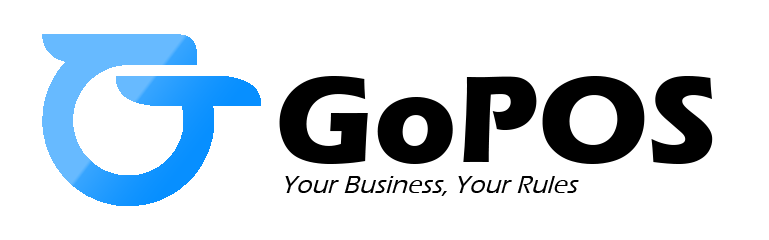
<style>
.page{position:relative;width:769px;height:240px;background:#ffffff}
.page>*{position:absolute;margin:0}
.t1{font:127.1px "ErasITC-Bold";color:#000000}
.t2{font:26.5px "ErasITC-Medium";color:#000000}
</style>
<div class="page">
<p class="t1" style="left:279px;top:76px;width:434px;height:88px">GoPOS</p>
<p class="t2" style="left:285px;top:176px;width:294px;height:20px">Your Business, Your Rules</p>
</div>
